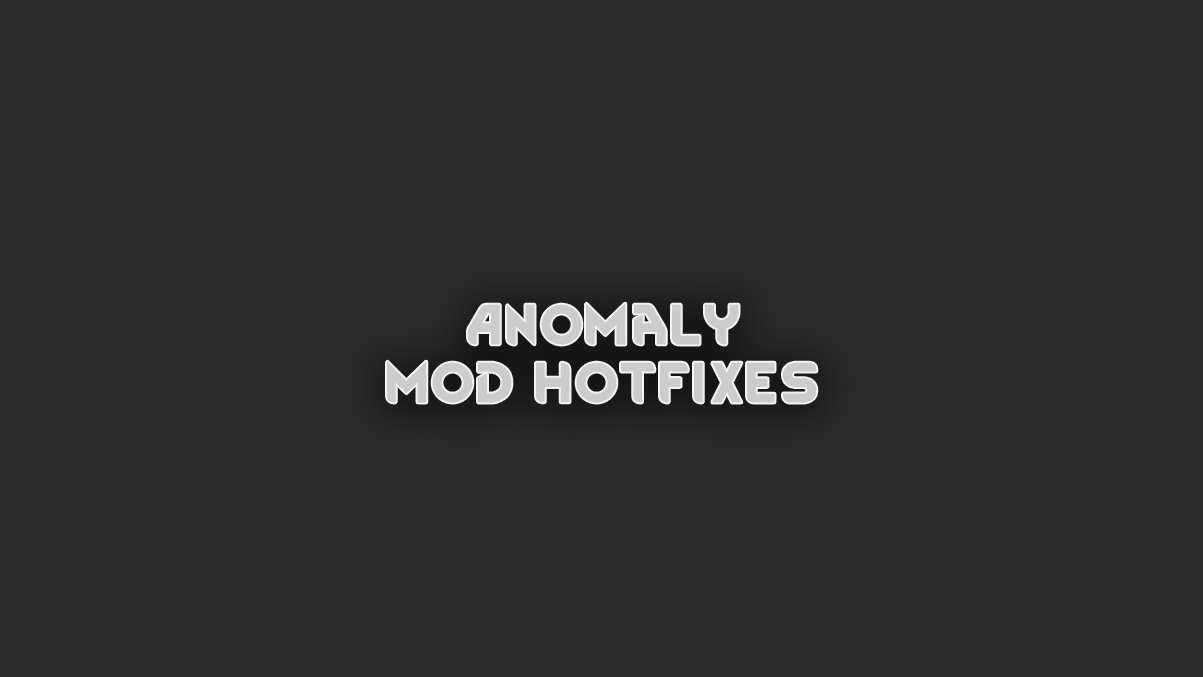
<style>
.page{position:relative;width:1203px;height:677px;background:#2b2b2b}
.page>*{position:absolute;margin:0}
.t1{font:48px "RimWordFont";color:#cccccc}
</style>
<div class="page">
<p class="t1" style="left:387px;top:303px;width:430px;height:100px;text-align:center">Anomaly<br>Mod hotfixes</p>
</div>
